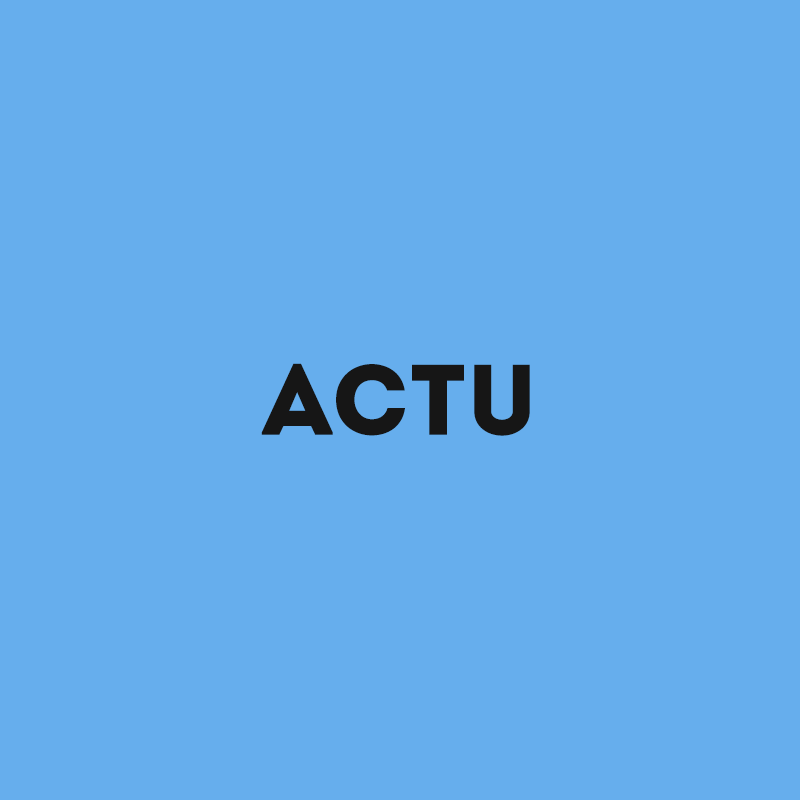
<style>
.page{position:relative;width:800px;height:800px;background:#66aeed}
.page>*{position:absolute;margin:0}
.t1{font:100px "Intro";color:#161616;font-variant:small-caps}
</style>
<div class="page">
<p class="t1" style="left:261px;top:363px;width:269px;height:73px">ACTU</p>
</div>
